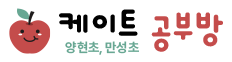
<style>
.page{position:relative;width:232px;height:62px;background:#ffffff}
.page>*{position:absolute;margin:0}
.t1{font:51.8px "Dongle-Bold";color:#000000}
.t2{font:51.8px "Dongle-Bold";color:#c44c4b}
.t3{font:13px "Pretendard-Bold";color:#68a793}
</style>
<div class="page">
<p class="t1" style="left:59px;top:9px;width:164px;height:43px">케이트 <span class="t2">공부방</span></p>
<p class="t3" style="left:65px;top:41px;width:74px;height:14px">양현초, 만성초</p>
</div>
